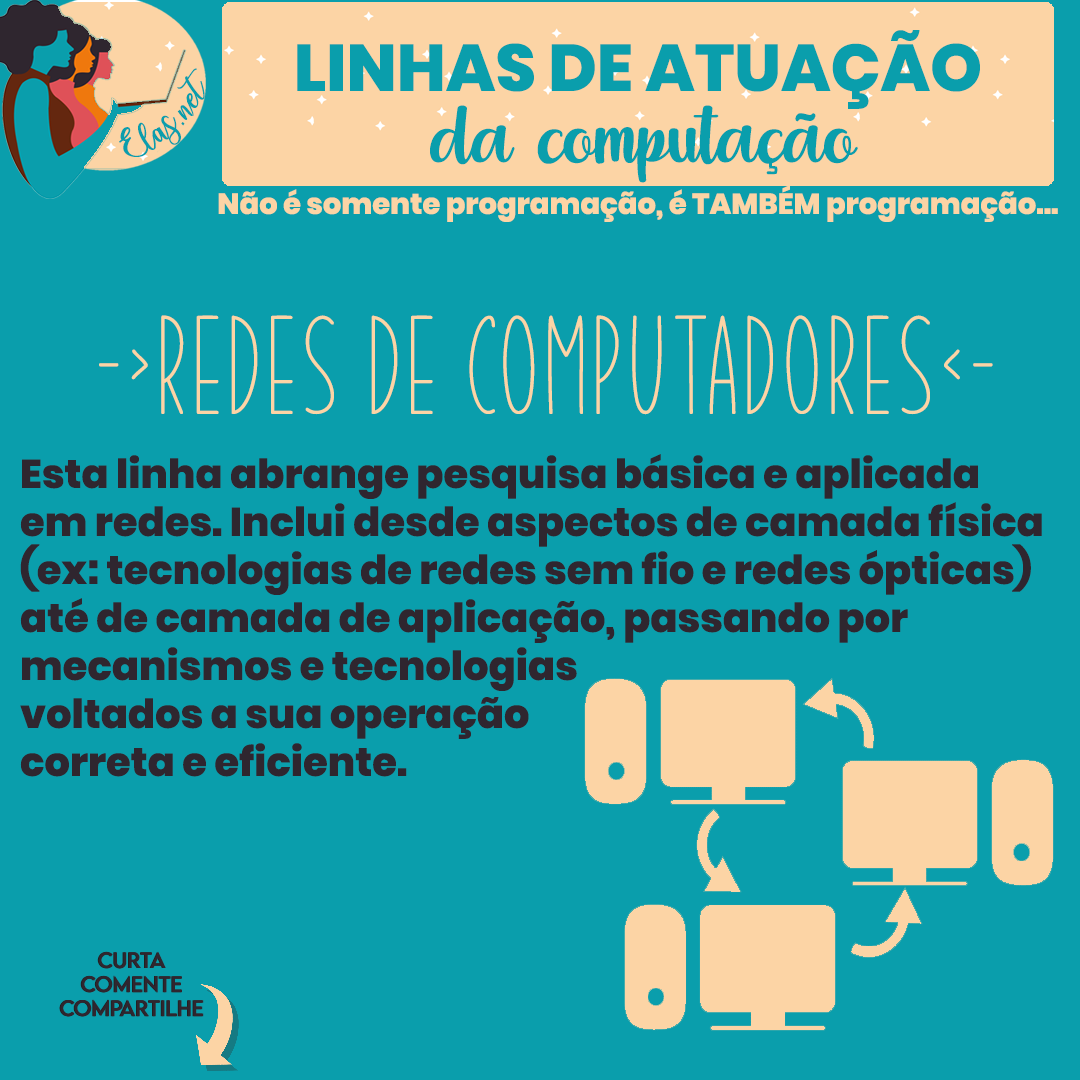
<style>
.page{position:relative;width:1080px;height:1080px;background:#0a9eac}
.page>*{position:absolute;margin:0}
.t1{font:66px "Poppins-ExtraBold";color:#0a9eac}
.t2{font:25px "charlinda-Regular";color:#0a9eac;scale:1.18 1}
.t3{font:128.1px "puttroe";color:#0a9eac}
.t4{font:29px "Poppins-ExtraBold";color:#fcd4a5}
.t5{font:140.1px "SummerGarden";color:#fcd4a5}
.t6{font:40px "Poppins-ExtraBold";color:#2f262f}
.t7{font:20px "LEMONMILK-Regular";color:#202021}
.t8{font:20px "LEMONMILK-Regular";color:#2f262f}
</style>
<div class="page">
<p class="t1" style="left:297px;top:30px;width:683px;height:79px">LINHAS DE ATUAÇÃO</p>
<p class="t2" style="left:119px;top:68px;width:86px;height:89px;rotate:-43deg">Elas.net</p>
<p class="t3" style="left:430px;top:105px;width:428px;height:78px">da computação</p>
<p class="t4" style="left:218px;top:185px;width:840px;height:37px">Não é somente programação, é TAMBÉM programação...</p>
<p class="t5" style="left:99px;top:315px;width:894px;height:100px">-&gt;REDES DE COMPUTADORES&lt;-</p>
<p class="t6" style="left:20px;top:454px;width:1022px;height:323px">Esta linha abrange pesquisa básica e aplicada <br>em redes. Inclui desde aspectos de camada física <br>(ex: tecnologias de redes sem fio e redes ópticas) <br>até de camada de aplicação, passando por <br>mecanismos e tecnologias <br>voltados a sua operação <br>correta e eficiente.</p>
<p class="t7" style="left:59px;top:951px;width:144px;height:66px;text-align:center">Curta<br>Comente<br>Compartilhe</p>
<p class="t8" style="left:60px;top:951px;width:144px;height:66px;text-align:center">Curta<br>Comente<br>Compartilhe</p>
</div>
